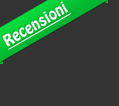
<style>
.page{position:relative;width:119px;height:106px;background:#333333}
.page>*{position:absolute;margin:0}
.t1{font:14px "HoboStd";letter-spacing:0.02em;color:#ffffff;text-decoration:underline}
</style>
<div class="page">
<p class="t1" style="left:2px;top:1px;width:69px;height:49px;rotate:-30deg">Recensioni</p>
</div>
